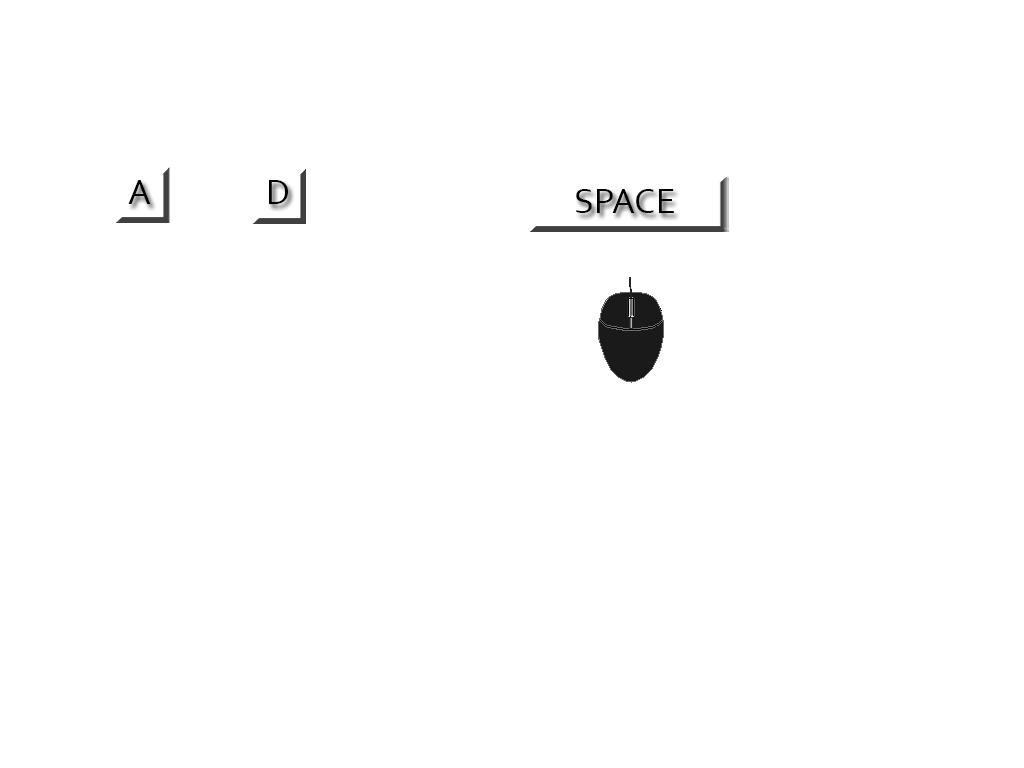
<style>
.page{position:relative;width:1024px;height:768px;background:#ffffff}
.page>*{position:absolute;margin:0}
.t1{font:36px "Corbel";color:#000000}
</style>
<div class="page">
<p class="t1" style="left:128px;top:180px;width:23px;height:24px">A</p>
<p class="t1" style="left:269px;top:180px;width:19px;height:24px">D</p>
<p class="t1" style="left:576px;top:189px;width:98px;height:24px">SPACE</p>
</div>
